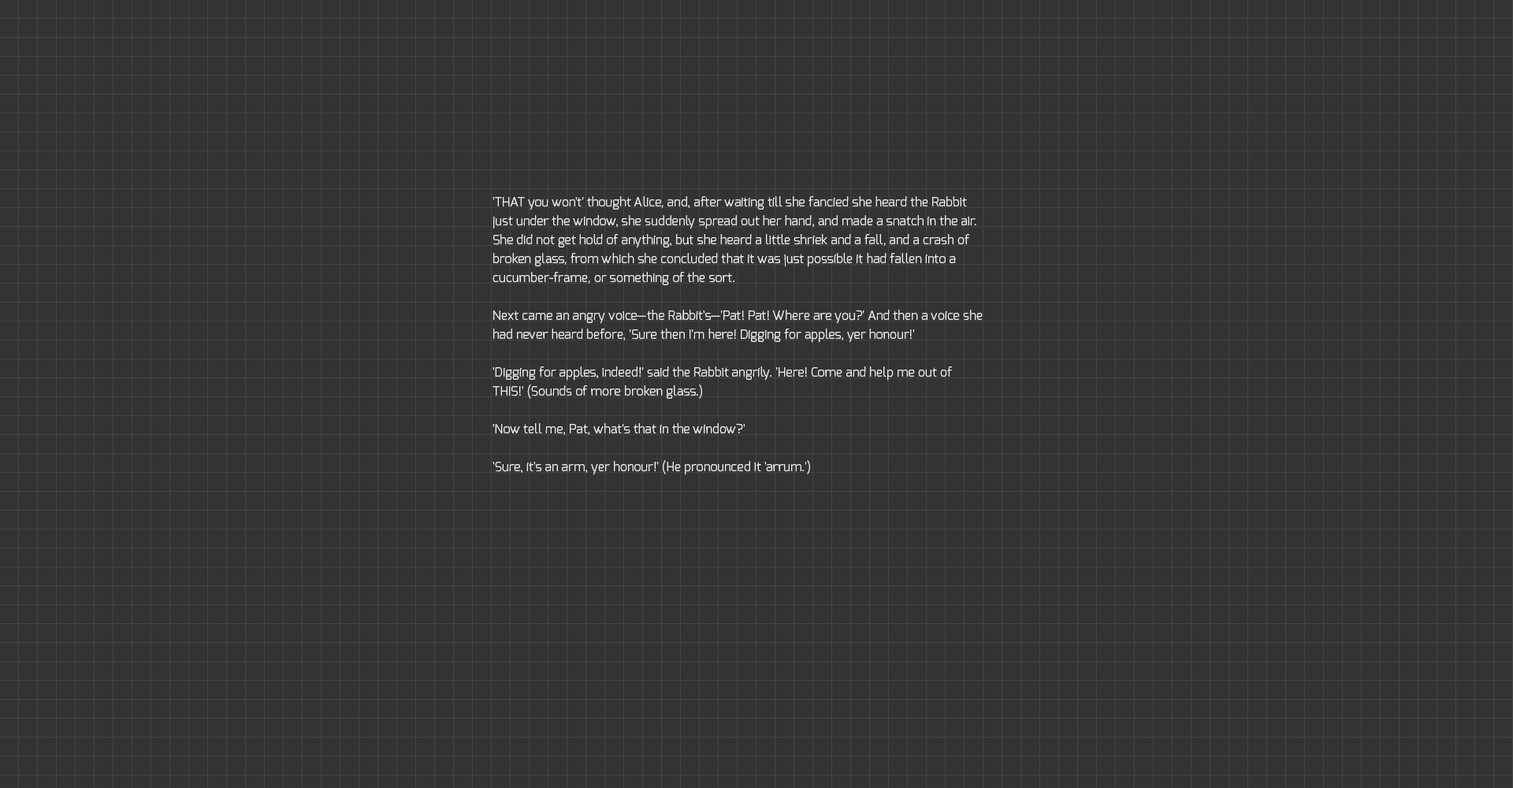
<style>
.page{position:relative;width:1513px;height:788px;background:#333333}
.page>*{position:absolute;margin:0}
.t1{font:12.6px/18.9px "Exo-Light";color:#eeeeee}
</style>
<div class="page">
<p class="t1" style="left:493px;top:196px;width:490px;height:279px">'THAT you won't' thought Alice, and, after waiting till she fancied she heard the Rabbit just under the window, she suddenly spread out her hand, and made a snatch in the air. She did not get hold of anything, but she heard a little shriek and a fall, and a crash of broken glass, from which she concluded that it was just possible it had fallen into a cucumber-frame, or something of the sort.<br><br>Next came an angry voice—the Rabbit's—'Pat! Pat! Where are you?' And then a voice she had never heard before, 'Sure then I'm here! Digging for apples, yer honour!'<br><br>'Digging for apples, indeed!' said the Rabbit angrily. 'Here! Come and help me out of THIS!' (Sounds of more broken glass.)<br><br>'Now tell me, Pat, what's that in the window?'<br><br>'Sure, it's an arm, yer honour!' (He pronounced it 'arrum.')</p>
</div>
